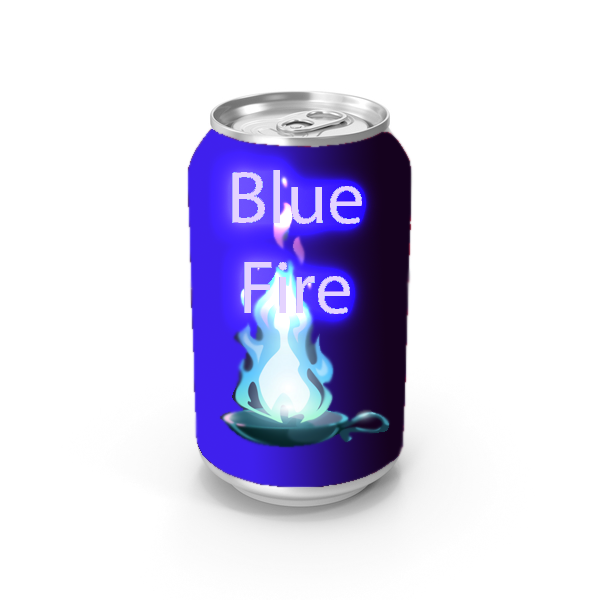
<style>
.page{position:relative;width:600px;height:600px;background:#ffffff}
.page>*{position:absolute;margin:0}
.t1{font:75px "MyriadPro-Regular";color:#e4d3ff}
</style>
<div class="page">
<p class="t1" style="left:232px;top:170px;width:130px;height:144px;text-align:center">Blue<br>Fire</p>
<p class="t1" style="left:232px;top:170px;width:130px;height:144px;text-align:center">Blue<br>Fire</p>
</div>
